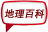
<style>
.page{position:relative;width:48px;height:32px;background:#fffcfd}
.page>*{position:absolute;margin:0}
.t1{font:9.7px "SimHei";color:#720404;font-weight:bold;font-style:italic}
</style>
<div class="page">
<p class="t1" style="left:4px;top:9px;width:40px;height:10px">地理百科</p>
</div>
